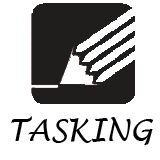
<style>
.page{position:relative;width:160px;height:160px;background:#ffffff}
.page>*{position:absolute;margin:0}
.t1{font:30px "LucidaHandwriting-Italic";color:#000000}
</style>
<div class="page">
<p class="t1" style="left:11px;top:116px;width:142px;height:29px">TASKING</p>
</div>
